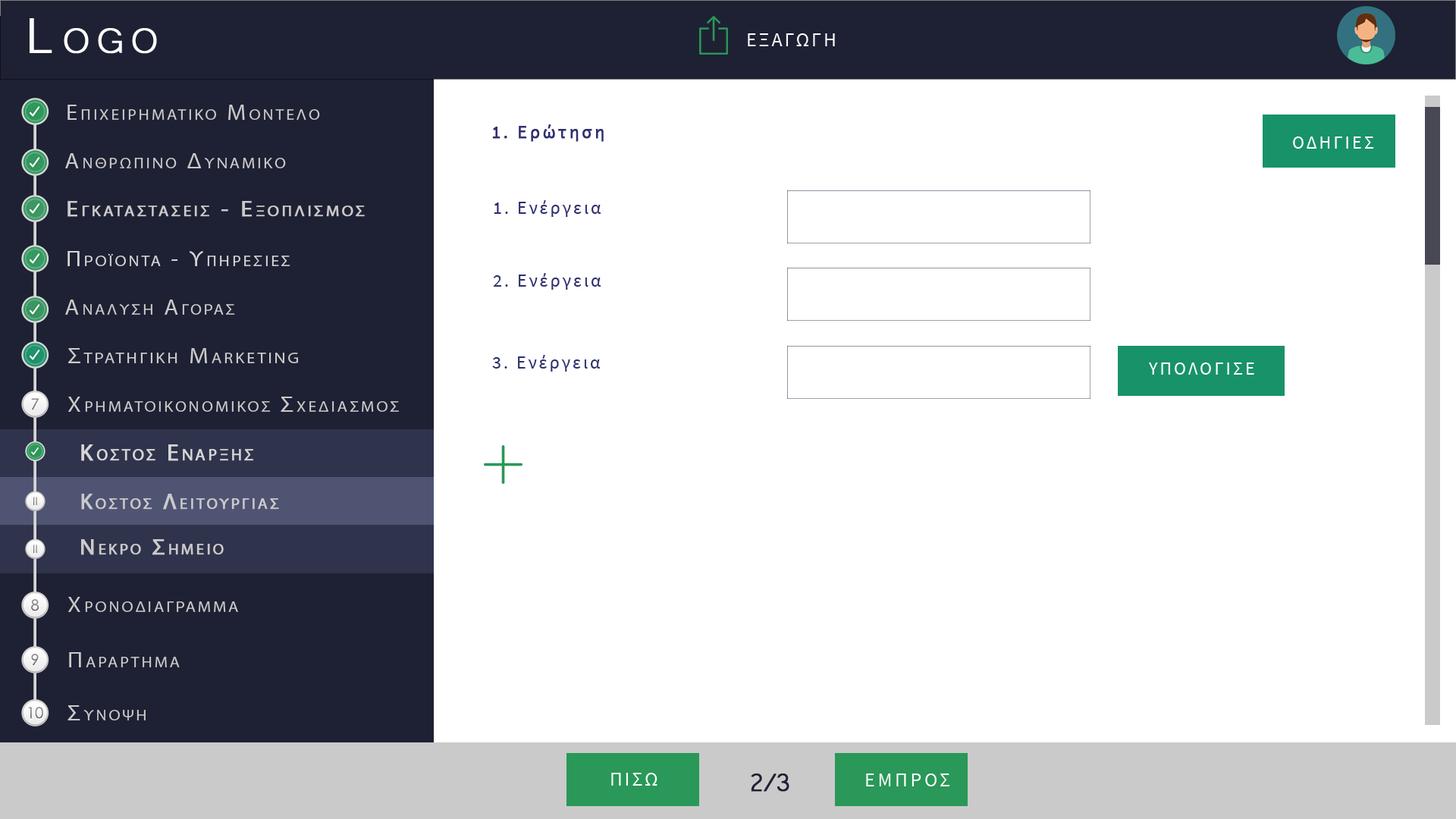
<style>
.page{position:relative;width:1456px;height:819px;background:#ffffff}
.page>*{position:absolute;margin:0}
.t1{font:63.7px "Microsoft-Yi-Baiti";letter-spacing:0.13em;color:#ffffff;font-variant:small-caps;font-weight:bold}
.t2{font:20px "SourceSansPro-Regular";letter-spacing:0.1em;color:#fefefe;text-transform:uppercase}
.t3{font:21.7px "MyriadPro-Regular";letter-spacing:0.13em;color:#cbcaca;font-variant:small-caps;scale:1.09 1}
.t4{font:23.4px "Microsoft-Yi-Baiti";letter-spacing:0.13em;color:#cbcaca;font-variant:small-caps;font-weight:bold}
.t5{font:18.2px "SourceSansPro-Regular";letter-spacing:0.13em;color:#2f2f70;font-weight:bold}
.t6{font:18.2px "SourceSansPro-Regular";letter-spacing:0.13em;color:#2f2f70;text-transform:uppercase;font-weight:bold}
.t7{font:18.2px "SourceSansPro-Regular";letter-spacing:0.13em;color:#ffffff;text-transform:uppercase}
.t8{font:21.7px/91px "MyriadPro-Regular";letter-spacing:0.13em;color:#cbcaca;font-variant:small-caps;font-weight:bold;scale:1.09 1}
.t9{font:23.4px/91px "Microsoft-Yi-Baiti";letter-spacing:0.13em;color:#cbcaca;font-variant:small-caps;font-weight:bold}
.t10{font:18.2px "SourceSansPro-Regular";letter-spacing:0.13em;color:#2f2f70}
.t11{font:18.2px "SourceSansPro-Regular";letter-spacing:0.13em;color:#2f2f70;text-transform:uppercase}
.t12{font:21.7px "MyriadPro-Regular";letter-spacing:0.13em;color:#d6d6d6;font-variant:small-caps;scale:1.09 1}
.t13{font:23.4px "Microsoft-Yi-Baiti";letter-spacing:0.13em;color:#d6d6d6;font-variant:small-caps;font-weight:bold}
.t14{font:22.2px "MyriadPro-Regular";letter-spacing:0.13em;color:#cbcaca;font-variant:small-caps;scale:1.09 1}
.t15{font:25.5px "Microsoft-Yi-Baiti";letter-spacing:0.13em;color:#cbcaca;font-variant:small-caps;font-weight:bold}
.t16{font:15.3px "CenturyGothic";color:#888888}
.t17{font:23.4px "MyriadPro-Regular";letter-spacing:0.13em;color:#d6d6d6;font-variant:small-caps;font-weight:bold}
.t18{font:11.2px "CenturyGothic";color:#828282}
.t19{font:22.3px "MyriadPro-Regular";letter-spacing:0.13em;color:#cbcaca;font-variant:small-caps;font-weight:bold}
.t20{font:15.3px "CenturyGothic";color:#8b8b8b}
.t21{font:15.3px "CenturyGothic";color:#838383}
.t22{font:23.7px "Microsoft-Yi-Baiti";letter-spacing:0.13em;color:#cbcaca;font-variant:small-caps;scale:1.09 1}
.t23{font:15.3px "CenturyGothic";color:#878787}
.t24{font:32.8px "Microsoft-Yi-Baiti";letter-spacing:-0.1em;color:#1e2133;font-weight:bold}
.t25{font:20px "SourceSansPro-Regular";letter-spacing:0.13em;color:#fefefe;text-transform:uppercase}
</style>
<div class="page">
<p class="t1" style="left:30px;top:18px;width:127px;height:36px">Logo</p>
<p class="t2" style="left:748px;top:33px;width:87px;height:13px">εξαγωγη</p>
<p class="t3" style="left:67px;top:105px;width:253px;height:15px"><span class="t4">   </span>Επιχειρηματικο Μοντελο</p>
<p class="t5" style="left:492px;top:124px;width:112px;height:18px"><span class="t6">1. </span>Ερώτηση</p>
<p class="t7" style="left:1293px;top:136px;width:81px;height:13px">Οδηγιεσ</p>
<p class="t3" style="left:65px;top:153px;width:221px;height:15px"><span class="t4">   </span>Ανθρωπινο Δυναμικο</p>
<p class="t8" style="left:67px;top:201px;width:298px;height:16px"><span class="t9">   </span>Εγκαταστασεισ - Εξοπλισμοσ<br><br><span class="t9">Equipment</span></p>
<p class="t10" style="left:494px;top:200px;width:107px;height:17px"><span class="t11">1. </span>Ενέργεια</p>
<p class="t12" style="left:67px;top:251px;width:223px;height:15px"><span class="t13">   </span>Προϊοντα - Υπηρεσιεσ</p>
<p class="t10" style="left:493px;top:273px;width:108px;height:17px"><span class="t11">2. </span>Ενέργεια</p>
<p class="t3" style="left:65px;top:300px;width:170px;height:15px"><span class="t4">   </span>Αναλυση Αγορασ</p>
<p class="t14" style="left:68px;top:348px;width:230px;height:15px"><span class="t15">   </span>Στρατηγικη Marketing</p>
<p class="t10" style="left:492px;top:355px;width:109px;height:17px"><span class="t11">3. </span>Ενέργεια</p>
<p class="t7" style="left:1149px;top:362px;width:105px;height:13px">υπολογισε</p>
<p class="t16" style="left:31px;top:398px;width:8px;height:12px">7</p>
<p class="t3" style="left:67px;top:397px;width:332px;height:15px"><span class="t15">   </span>Χρηματοικονομικοσ Σχεδιασμοσ</p>
<p class="t17" style="left:81px;top:444px;width:172px;height:17px">Κοστοσ Εναρξησ</p>
<p class="t18" style="left:33px;top:497px;width:4px;height:9px">II</p>
<p class="t19" style="left:81px;top:494px;width:198px;height:16px">Κοστοσ Λειτουργιασ</p>
<p class="t18" style="left:33px;top:544px;width:4px;height:10px">II</p>
<p class="t19" style="left:81px;top:539px;width:143px;height:16px">Νεκρο Σημειο</p>
<p class="t20" style="left:31px;top:599px;width:8px;height:12px">8</p>
<p class="t3" style="left:67px;top:597px;width:171px;height:15px"><span class="t15">   </span>Χρονοδιαγραμμα</p>
<p class="t21" style="left:31px;top:654px;width:8px;height:12px">9</p>
<p class="t3" style="left:69px;top:652px;width:111px;height:15px"><span class="t22">   </span>Παραρτημα</p>
<p class="t23" style="left:28px;top:707px;width:15px;height:12px">10</p>
<p class="t3" style="left:67px;top:705px;width:79px;height:15px"><span class="t22">   </span>Συνοψη</p>
<p class="t2" style="left:611px;top:773px;width:46px;height:13px">Πισω</p>
<p class="t24" style="left:751px;top:773px;width:38px;height:19px">2/3</p>
<p class="t25" style="left:866px;top:773px;width:83px;height:13px">εμπροσ</p>
</div>
